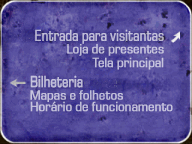
<style>
.page{position:relative;width:192px;height:144px}
.page>*{position:absolute;margin:0}
.t1{font:16px "EurostileNextLTPro-Regular";color:#bebad6;font-weight:bold;scale:0.75 1}
.t2{font:13.3px "EurostileNextLTPro-Regular";color:#c3c0db;font-weight:bold;scale:0.9 1}
.t3{font:16px "EurostileNextLTPro-Regular";color:#c0beda;font-weight:bold;scale:0.75 1}
.t4{font:13.3px "EurostileNextLTPro-Regular";color:#c2beda;font-weight:bold;scale:0.9 1}
.t5{font:13.3px "EurostileNextLTPro-Regular";color:#c0beda;font-weight:bold;scale:0.9 1}
</style>
<div class="page">
<p class="t1" style="left:35px;top:29px;width:129px;height:15px">Entrada para visitantas</p>
<p class="t2" style="left:67px;top:44px;width:97px;height:12px">Loja de presentes</p>
<p class="t2" style="left:92px;top:57px;width:72px;height:13px">Tela principal</p>
<p class="t3" style="left:30px;top:75px;width:53px;height:13px">Bilheteria</p>
<p class="t4" style="left:30px;top:101px;width:143px;height:11px">Horário de funcionamento</p>
<p class="t5" style="left:30px;top:90px;width:93px;height:12px">Mapas e folhetos</p>
</div>
